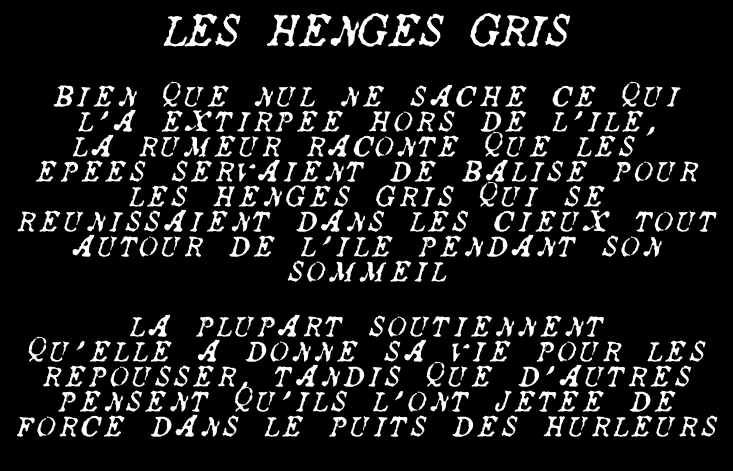
<style>
.page{position:relative;width:733px;height:471px;background:#000000}
.page>*{position:absolute;margin:0}
.t1{font:70px "AncientStory";color:#ffffff}
.t2{font:45px/25px "AncientStory";letter-spacing:0.1em;color:#ffffff}
.t3{font:45px/25px "AquilineTwo";letter-spacing:0.1em;color:#ffffff}
</style>
<div class="page">
<p class="t1" style="left:163px;top:12px;width:408px;height:35px">Les Henges Gris</p>
<p class="t2" style="left:17px;top:81px;width:700px;height:201px;text-align:center">Bien que nul ne sache ce qui<br>l<span class="t3">'</span>a extirpee hors de l<span class="t3">'</span>ile<span class="t3">,<br></span>la rumeur raconte que les <br>EpEes servaient de balise pour<br>les henges gris qui se<br>reunissaient dans les cieux tout<br>autour de l<span class="t3">'</span>Ile pendant son<br>sommeil</p>
<p class="t2" style="left:16px;top:314px;width:702px;height:123px;text-align:center">La plupart soutiennent<br>qu<span class="t3">'</span>elle a donne sa vie pour les<br>repousser<span class="t3">,</span> tandis que d<span class="t3">'</span>autres<br>pensent qu<span class="t3">'</span>ils l<span class="t3">'</span>ont jetee de<br>force dans le puits des hurleurs</p>
</div>
